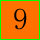
<style>
.page{position:relative;width:40px;height:40px;background:#ff7200}
.page>*{position:absolute;margin:0}
.t1{font:30px "SimSun";color:#000000}
</style>
<div class="page">
<p class="t1" style="left:14px;top:8px;width:13px;height:22px">9</p>
</div>
